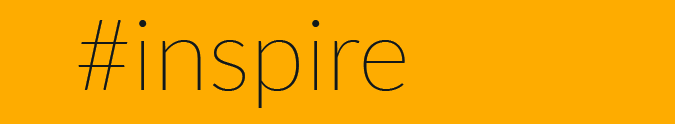
<style>
.page{position:relative;width:675px;height:124px;background:#feac00}
.page>*{position:absolute;margin:0}
.t1{font:100px "Lato-Thin";color:#141819}
</style>
<div class="page">
<p class="t1" style="left:78px;top:20px;width:327px;height:88px">#inspire</p>
</div>
